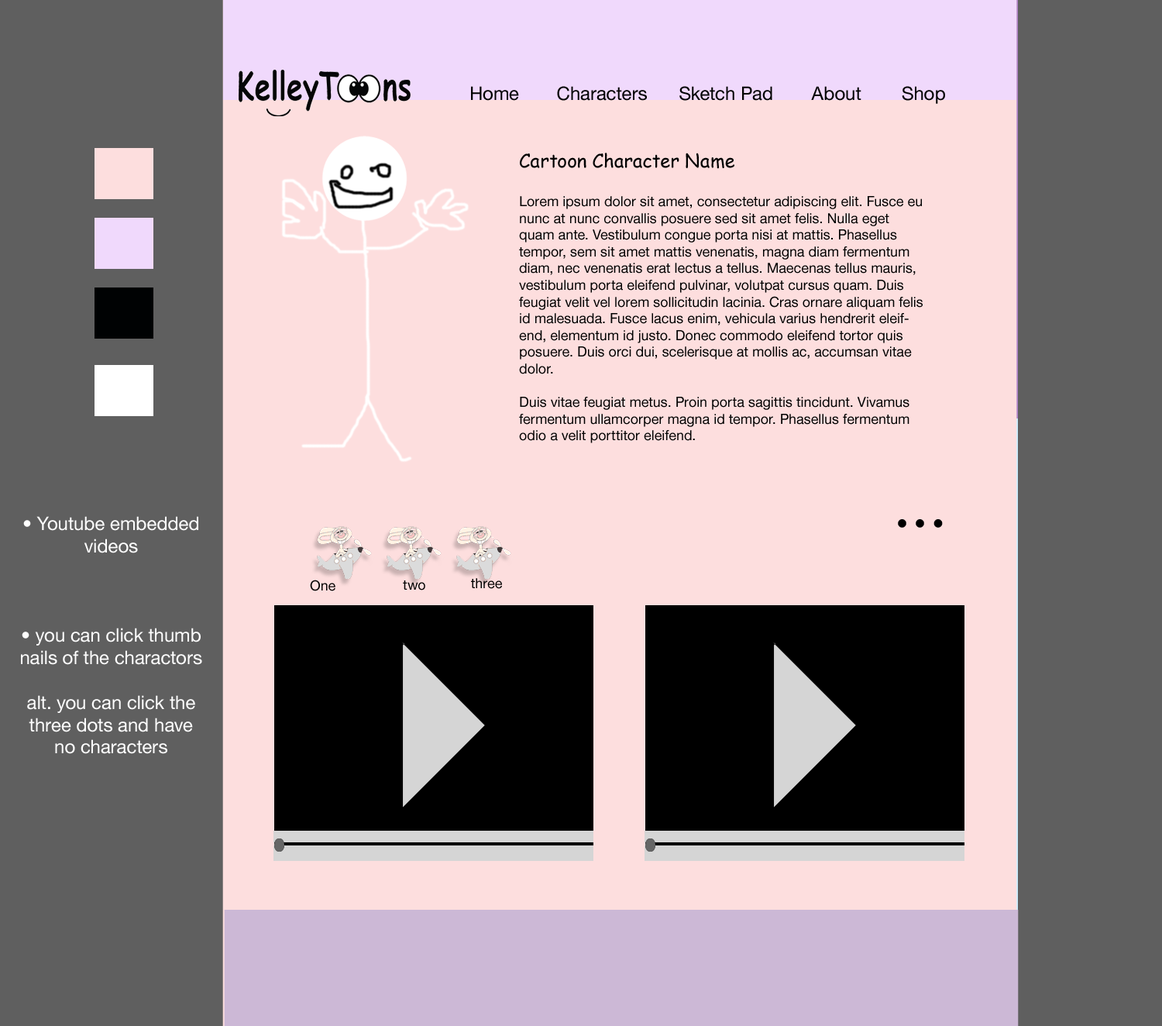
<style>
.page{position:relative;width:1162px;height:1026px;background:#fddede}
.page>*{position:absolute;margin:0}
.t1{font:18.6px "HelveticaNeue";color:#000000}
.t2{font:13.9px "HelveticaNeue";color:#000000}
.t3{font:18.6px "ComicSansMS";color:#000000}
.t4{font:18.6px "HelveticaNeue";color:#ffffff}
.t5{font:23.2px "HelveticaNeue";color:#000000}
</style>
<div class="page">
<p class="t1" style="left:471px;top:86px;width:48px;height:15px">Home</p>
<p class="t1" style="left:557px;top:86px;width:90px;height:15px">Characters</p>
<p class="t1" style="left:680px;top:86px;width:93px;height:15px">Sketch Pad</p>
<p class="t1" style="left:811px;top:86px;width:51px;height:15px">About</p>
<p class="t1" style="left:902px;top:86px;width:43px;height:18px">Shop</p>
<p class="t2" style="left:519px;top:153px;width:404px;height:290px"><span class="t3">Cartoon Character Name<br><br></span>Lorem ipsum dolor sit amet, consectetur adipiscing elit. Fusce eu nunc at nunc convallis posuere sed sit amet felis. Nulla eget quam ante. Vestibulum congue porta nisi at mattis. Phasellus tempor, sem sit amet mattis venenatis, magna diam fermentum diam, nec venenatis erat lectus a tellus. Maecenas tellus mauris, vestibulum porta eleifend pulvinar, volutpat cursus quam. Duis feugiat velit vel lorem sollicitudin lacinia. Cras ornare aliquam felis id malesuada. Fusce lacus enim, vehicula varius hendrerit eleifend, elementum id justo. Donec commodo eleifend tortor quis posuere. Duis orci dui, scelerisque at mollis ac, accumsan vitae dolor.<br><br>Duis vitae feugiat metus. Proin porta sagittis tincidunt. Vivamus fermentum ullamcorper magna id tempor. Phasellus fermentum odio a velit porttitor eleifend.<br><span class="t3"><br>Ut gravida sodales lectus, at eleifend urna suscipit in. Proin sit amet odio sit amet leo suscipit posuere vitae in arcu. Etiam at urna in orci egestas consectetur. Fusce a interdum arcu. Suspendisse ac ante nisl. Quisque auctor ornare pulvinar. Curabitur volutpat sem quis enim laoreet sed bibendum est convallis. Phasellus et velit ac magna posuere dignissim. Etiam nisi magna, vehicula nec convallis vitae, blandit quis justo. Nunc urna orci, ullamcorper non imperdiet vel, pretium at dolor. Aenean ut nisi justo, ut gravida velit.</span></p>
<p class="t4" style="left:21px;top:516px;width:181px;height:238px;text-align:center">• Youtube embedded videos<br><br><br><br>• you can click thumb nails of the charactors <br><br>alt. you can click the three dots and have no characters</p>
<p class="t5" style="left:898px;top:519px;width:45px;height:9px">• • •</p>
<p class="t2" style="left:310px;top:580px;width:26px;height:11px">One</p>
<p class="t2" style="left:403px;top:580px;width:22px;height:10px">two</p>
<p class="t2" style="left:471px;top:578px;width:31px;height:11px">three</p>
</div>
